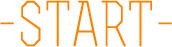
<style>
.page{position:relative;width:172px;height:47px;background:#ffffff}
.page>*{position:absolute;margin:0}
.t1{font:60px "RexLight";color:#ff8100;font-weight:bold}
</style>
<div class="page">
<p class="t1" style="left:0px;top:0px;width:172px;height:47px">-START-</p>
</div>
